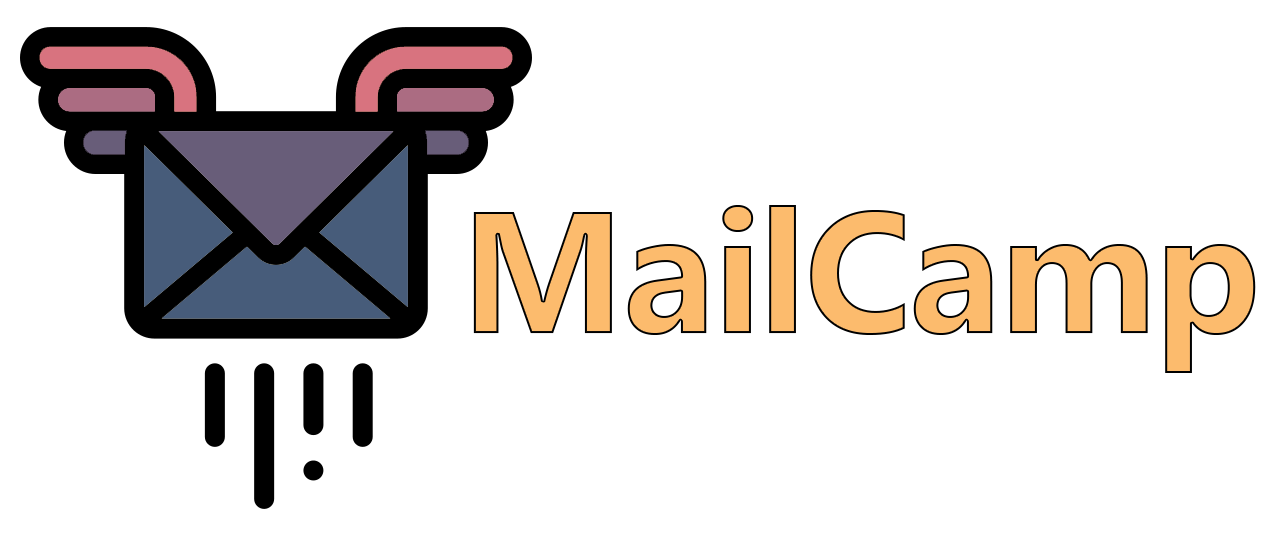
<style>
.page{position:relative;width:1276px;height:536px;background:#ffffff}
.page>*{position:absolute;margin:0}
.t1{font:173.3px "SegoeUI-Bold";letter-spacing:-0.02em;color:#fcbb6d}
</style>
<div class="page">
<p class="t1" style="left:473px;top:205px;width:783px;height:168px">MailCamp</p>
</div>
